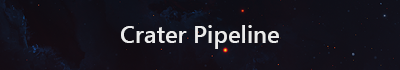
<style>
.page{position:relative;width:400px;height:70px}
.page>*{position:absolute;margin:0}
.t1{font:24px "SegoeUI-Semibold";color:#ebebeb}
</style>
<div class="page">
<p class="t1" style="left:121px;top:25px;width:158px;height:24px">Crater Pipeline</p>
</div>
